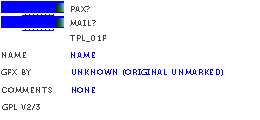
<style>
.page{position:relative;width:260px;height:120px;background:#ffffff}
.page>*{position:absolute;margin:0}
.t1{font:8px "Museo700-Regular";letter-spacing:0.075em;color:#404040;text-transform:uppercase}
.t2{font:8px "Museo700-Regular";letter-spacing:0.075em;color:#0000ff;text-transform:uppercase}
</style>
<div class="page">
<p class="t1" style="left:71px;top:6px;width:19px;height:6px">pax?</p>
<p class="t1" style="left:70px;top:20px;width:26px;height:6px">mail?</p>
<p class="t1" style="left:70px;top:35px;width:36px;height:7px">tpl_01f</p>
<p class="t1" style="left:2px;top:52px;width:24px;height:6px">name</p>
<p class="t2" style="left:71px;top:52px;width:24px;height:6px">name</p>
<p class="t1" style="left:1px;top:69px;width:30px;height:6px">gfx by</p>
<p class="t2" style="left:72px;top:69px;width:151px;height:7px">unknown (original unmarked)</p>
<p class="t1" style="left:2px;top:87px;width:50px;height:6px">comments</p>
<p class="t2" style="left:72px;top:87px;width:23px;height:6px">none</p>
<p class="t1" style="left:2px;top:104px;width:38px;height:6px">gpl v2/3</p>
</div>
